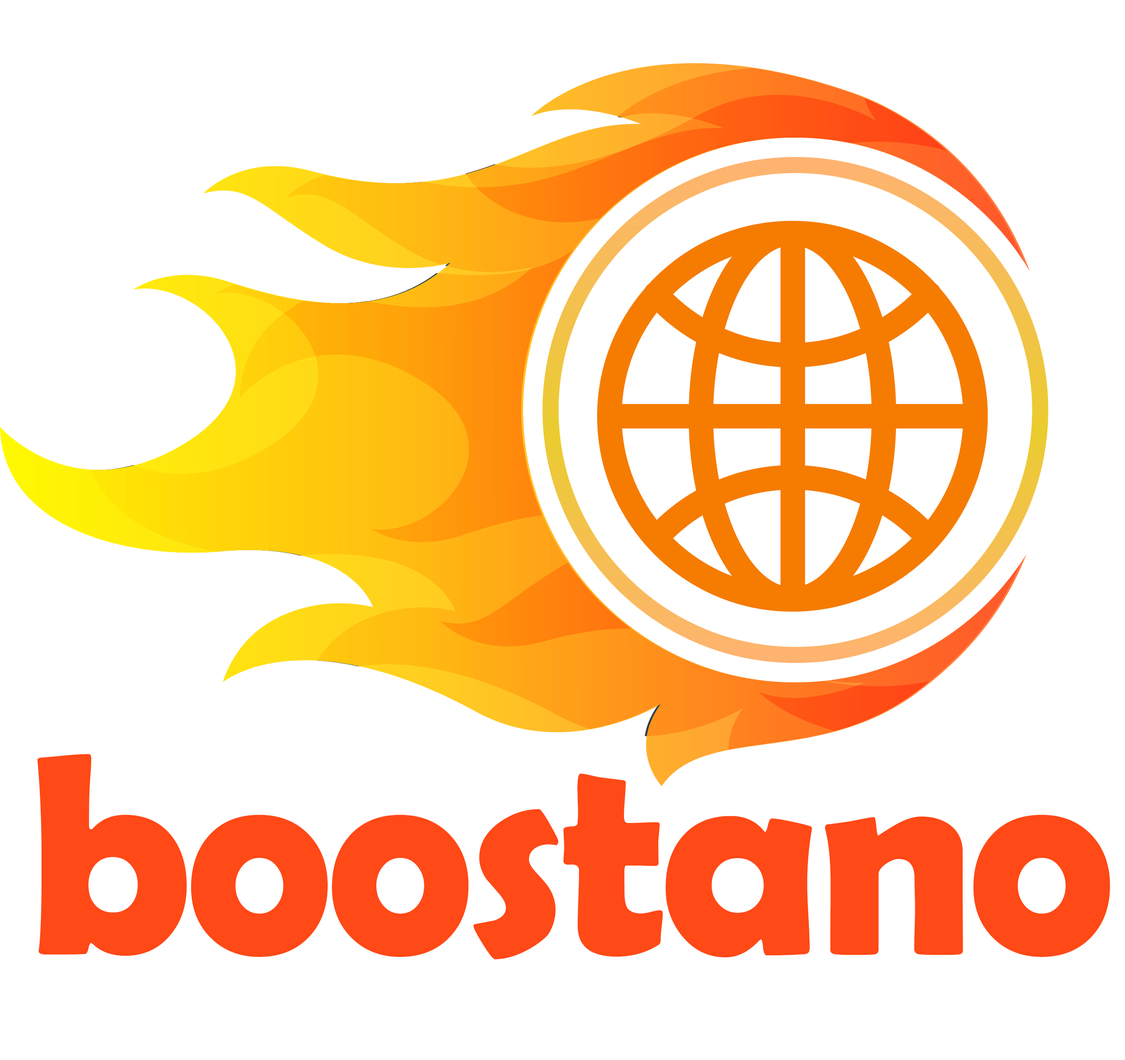
<style>
.page{position:relative;width:1125px;height:1060px;background:#ffffff}
.page>*{position:absolute;margin:0}
.t1{font:284.7px "BerlinSansFBDemi-Bold";letter-spacing:-0.02em;color:#ff4916}
</style>
<div class="page">
<p class="t1" style="left:37px;top:754px;width:1073px;height:205px">boostano</p>
</div>
